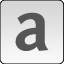
<style>
.page{position:relative;width:64px;height:64px}
.page>*{position:absolute;margin:0}
.t1{font:72px "FontinSans-Bold";letter-spacing:-0.05em;color:#565656}
</style>
<div class="page">
<p class="t1" style="left:15px;top:12px;width:34px;height:39px">a</p>
</div>
